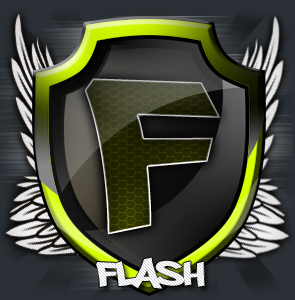
<style>
.page{position:relative;width:295px;height:300px}
.page>*{position:absolute;margin:0}
.t1{font:300px "PhillySans"}
.t2{font:48px "PhillySans";color:#fdfefe}
</style>
<div class="page">
<p class="t1" style="left:84px;top:78px;width:137px;height:157px">F</p>
<p class="t2" style="left:96px;top:257px;width:109px;height:32px">Flash</p>
</div>
